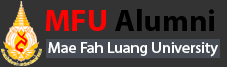
<style>
.page{position:relative;width:227px;height:67px;background:#333333}
.page>*{position:absolute;margin:0}
.t1{font:30.6px "MyriadHebrew-Bold";color:#000000}
.t2{font:30.6px "MyriadHebrew-Bold";color:#ff0100}
.t3{font:15.5px "MyriadHebrew-Regular";color:#ffffff}
</style>
<div class="page">
<p class="t1" style="left:45px;top:9px;width:169px;height:22px"><span class="t2">MFU </span>Alumni</p>
<p class="t3" style="left:48px;top:42px;width:170px;height:15px">Mae Fah Luang University</p>
</div>
